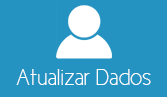
<style>
.page{position:relative;width:167px;height:97px;background:#2593c1}
.page>*{position:absolute;margin:0}
.t1{font:22.7px "CicleFina";color:#ffffff}
</style>
<div class="page">
<p class="t1" style="left:16px;top:69px;width:135px;height:16px">Atualizar Dados</p>
</div>
